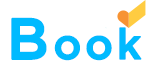
<style>
.page{position:relative;width:157px;height:62px;background:#ffffff}
.page>*{position:absolute;margin:0}
.t1{font:42.4px "iCielGotham-Medium";letter-spacing:0.06em;color:#00baff;font-weight:bold}
.t2{font:57.5px "iCielGotham-Medium";letter-spacing:0.06em;color:#00baff;font-weight:bold}
</style>
<div class="page">
<p class="t1" style="left:11px;top:17px;width:131px;height:44px"><span class="t2">B</span>ook</p>
</div>
